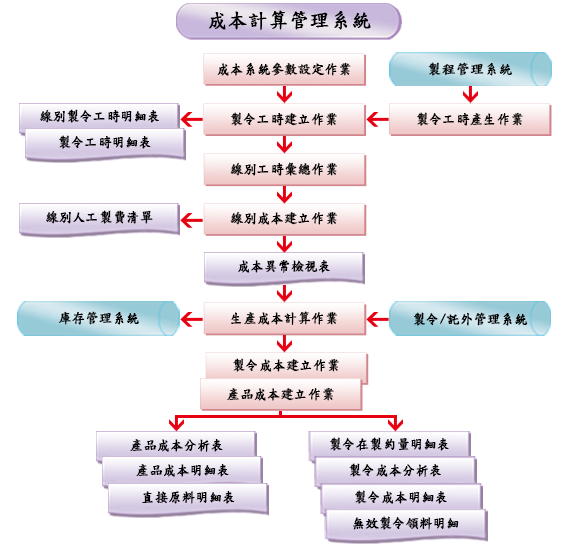
<style>
.page{position:relative;width:577px;height:545px;background:#ffffff}
.page>*{position:absolute;margin:0}
.t1{font:20.1px "DFKaiShu-SB-Estd-BF";color:#000000;font-weight:bold}
.t2{font:13.5px "DFKaiShu-SB-Estd-BF";color:#000000;font-weight:bold}
</style>
<div class="page">
<p class="t1" style="left:209px;top:10px;width:162px;height:20px">成本計算管理系統</p>
<p class="t2" style="left:217px;top:62px;width:134px;height:14px">成本系統參數設定作業</p>
<p class="t2" style="left:428px;top:62px;width:84px;height:14px">製程管理系統</p>
<p class="t2" style="left:40px;top:109px;width:119px;height:14px">線別製令工時明細表</p>
<p class="t2" style="left:231px;top:112px;width:106px;height:14px">製令工時建立作業</p>
<p class="t2" style="left:417px;top:112px;width:106px;height:14px">製令工時產生作業</p>
<p class="t2" style="left:59px;top:135px;width:92px;height:14px">製令工時明細表</p>
<p class="t2" style="left:230px;top:162px;width:108px;height:14px">線別工時彙總作業</p>
<p class="t2" style="left:46px;top:210px;width:107px;height:14px">線別人工製費清單</p>
<p class="t2" style="left:230px;top:211px;width:108px;height:14px">線別成本建立作業</p>
<p class="t2" style="left:238px;top:260px;width:92px;height:13px">成本異常檢視表</p>
<p class="t2" style="left:58px;top:311px;width:81px;height:14px">庫存管理系統</p>
<p class="t2" style="left:231px;top:311px;width:107px;height:14px">生產成本計算作業</p>
<p class="t2" style="left:413px;top:312px;width:115px;height:14px">製令/託外管理系統</p>
<p class="t2" style="left:233px;top:358px;width:106px;height:14px">製令成本建立作業</p>
<p class="t2" style="left:227px;top:387px;width:107px;height:14px">產品成本建立作業</p>
<p class="t2" style="left:330px;top:437px;width:119px;height:14px">製令在製約量明細表</p>
<p class="t2" style="left:130px;top:439px;width:93px;height:13px">產品成本分析表</p>
<p class="t2" style="left:136px;top:464px;width:93px;height:13px">產品成本明細表</p>
<p class="t2" style="left:349px;top:463px;width:92px;height:14px">製令成本分析表</p>
<p class="t2" style="left:142px;top:491px;width:93px;height:13px">直接原料明細表</p>
<p class="t2" style="left:355px;top:490px;width:92px;height:14px">製令成本明細表</p>
<p class="t2" style="left:353px;top:516px;width:106px;height:14px">無效製令領料明細</p>
</div>
